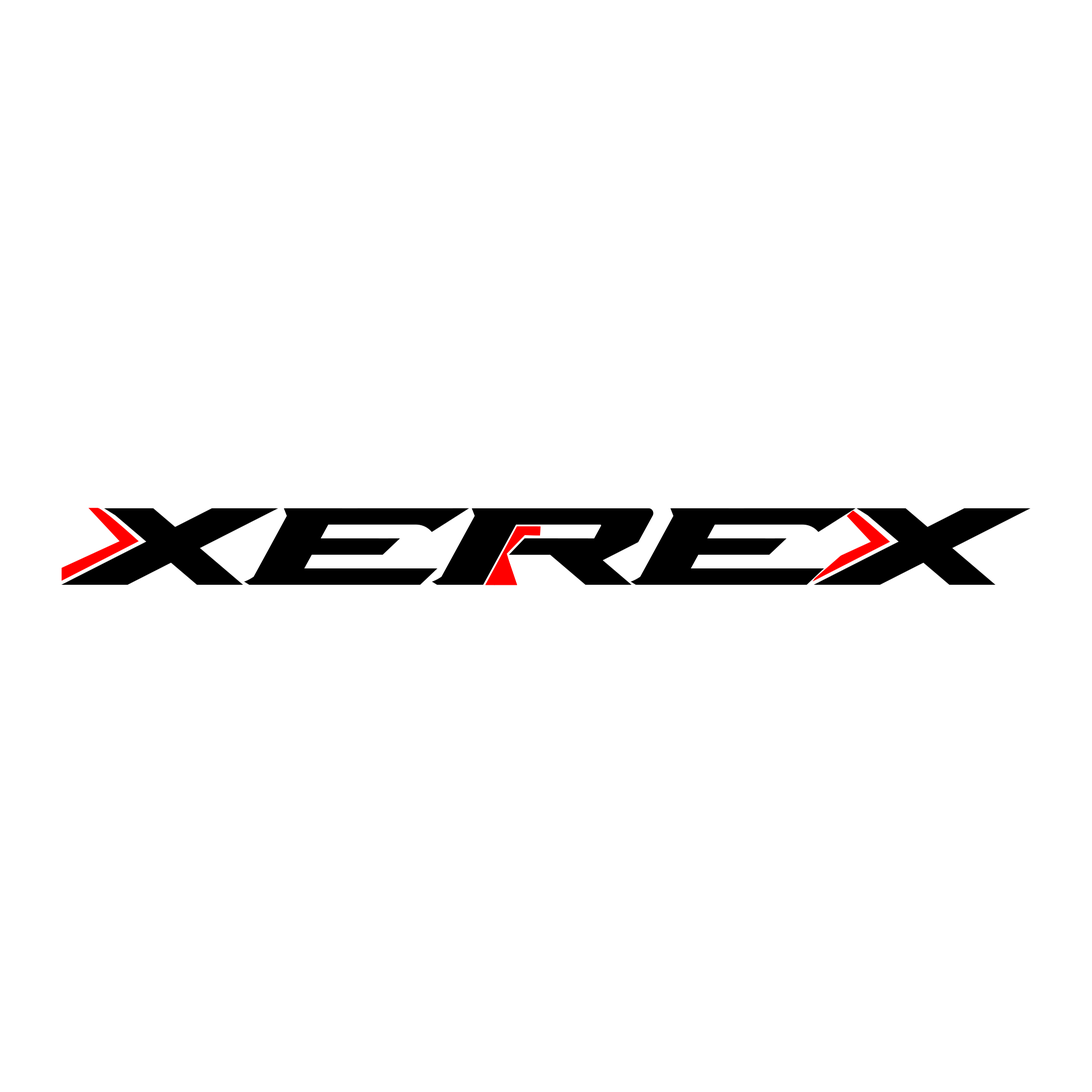
<style>
.page{position:relative;width:1092px;height:1092px;background:#ffffff}
.page>*{position:absolute;margin:0}
.t1{font:109.2px "DracoRegular";color:#000000}
</style>
<div class="page">
<p class="t1" style="left:61px;top:508px;width:970px;height:77px">xerex</p>
</div>
